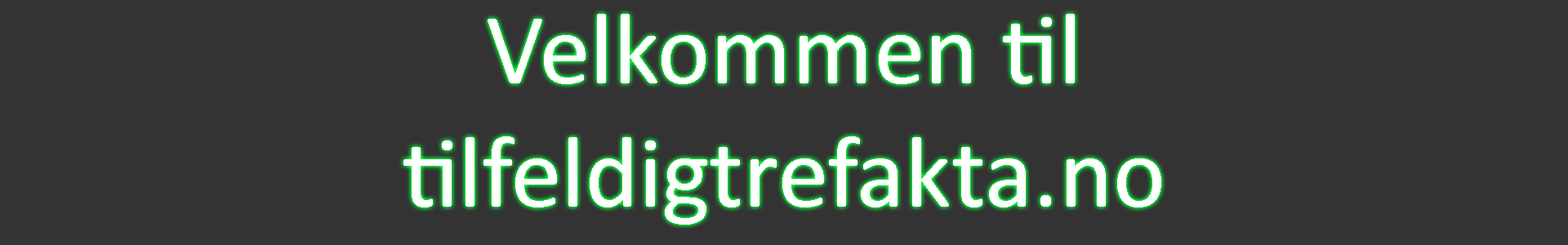
<style>
.page{position:relative;width:1568px;height:245px;background:#333333}
.page>*{position:absolute;margin:0}
.t1{font:102.2px "Calibri";color:#ffffff}
</style>
<div class="page">
<p class="t1" style="left:403px;top:14px;width:758px;height:211px;text-align:center">Velkommen til<br>tilfeldigtrefakta.no</p>
</div>
